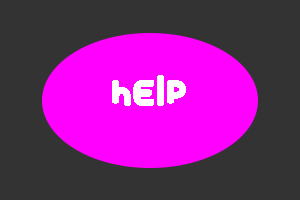
<style>
.page{position:relative;width:300px;height:200px;background:#333333}
.page>*{position:absolute;margin:0}
.t1{font:37.5px "RoundyRainbows";color:#ffffff}
</style>
<div class="page">
<p class="t1" style="left:112px;top:75px;width:74px;height:31px">Help</p>
</div>
